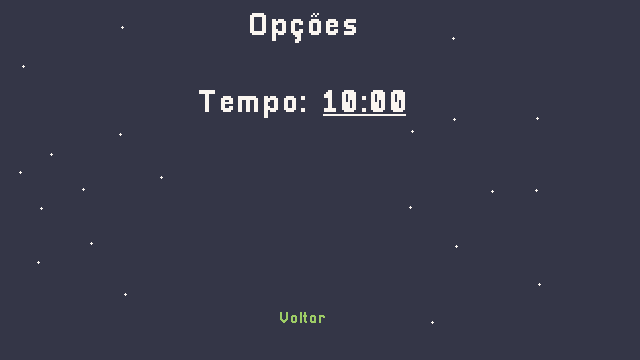
<style>
.page{position:relative;width:640px;height:360px;background:#343647}
.page>*{position:absolute;margin:0}
.t1{font:32px "Pixellari";letter-spacing:0.05em;color:#faf5f0}
.t2{font:16px "Pixellari";letter-spacing:0.05em;color:#9dcc66}
</style>
<div class="page">
<p class="t1" style="left:199px;top:13px;width:206px;height:310px;text-align:center">Opções<br><br>Tempo: 10:00<br><br><br><br><span class="t2"><br><br><br><br>Voltar</span></p>
</div>
